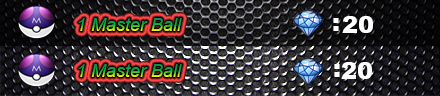
<style>
.page{position:relative;width:440px;height:96px}
.page>*{position:absolute;margin:0}
.t1{font:24px "Arial-Black";color:#ffffff}
.t2{font:18px "Arial-ItalicMT"}
</style>
<div class="page">
<p class="t1" style="left:342px;top:16px;width:31px;height:17px">20</p>
<p class="t2" style="left:78px;top:18px;width:104px;height:13px">1 Master Ball</p>
<p class="t1" style="left:333px;top:18px;width:6px;height:13px">:</p>
<p class="t2" style="left:78px;top:64px;width:104px;height:13px">1 Master Ball</p>
<p class="t1" style="left:334px;top:64px;width:6px;height:13px">:</p>
<p class="t1" style="left:341px;top:62px;width:31px;height:17px">20</p>
</div>
